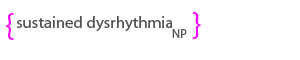
<style>
.page{position:relative;width:300px;height:60px;background:#ffffff}
.page>*{position:absolute;margin:0}
.t1{font:33.3px "MyriadPro-Regular";color:#f30df6}
.t2{font:16.7px "MyriadPro-Regular";color:#525252}
.t3{font:12.5px "MyriadPro-Regular";color:#525252}
</style>
<div class="page">
<p class="t1" style="left:6px;top:13px;width:8px;height:27px">{</p>
<p class="t2" style="left:16px;top:16px;width:157px;height:16px">sustained dysrhythmia</p>
<p class="t1" style="left:192px;top:12px;width:9px;height:27px">}</p>
<p class="t3" style="left:172px;top:29px;width:15px;height:9px">NP</p>
</div>
